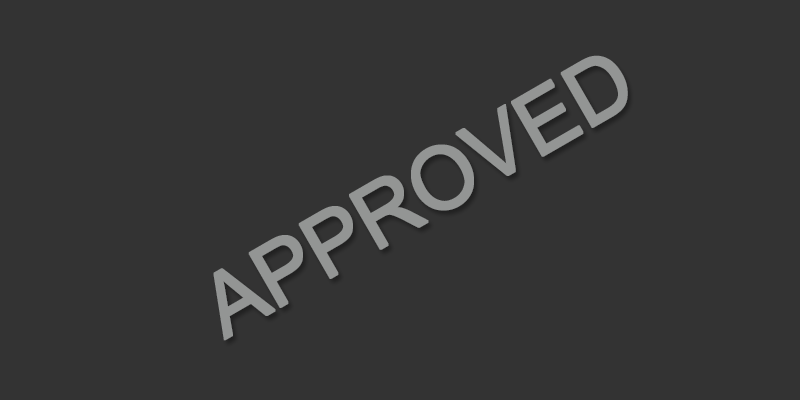
<style>
.page{position:relative;width:800px;height:400px;background:#333333}
.page>*{position:absolute;margin:0}
.t1{font:86.2px "ArialMT";letter-spacing:-0.025em;color:#939594;font-weight:bold}
</style>
<div class="page">
<p class="t1" style="left:213px;top:55px;width:415px;height:286px;rotate:-30deg">APPROVED</p>
</div>
